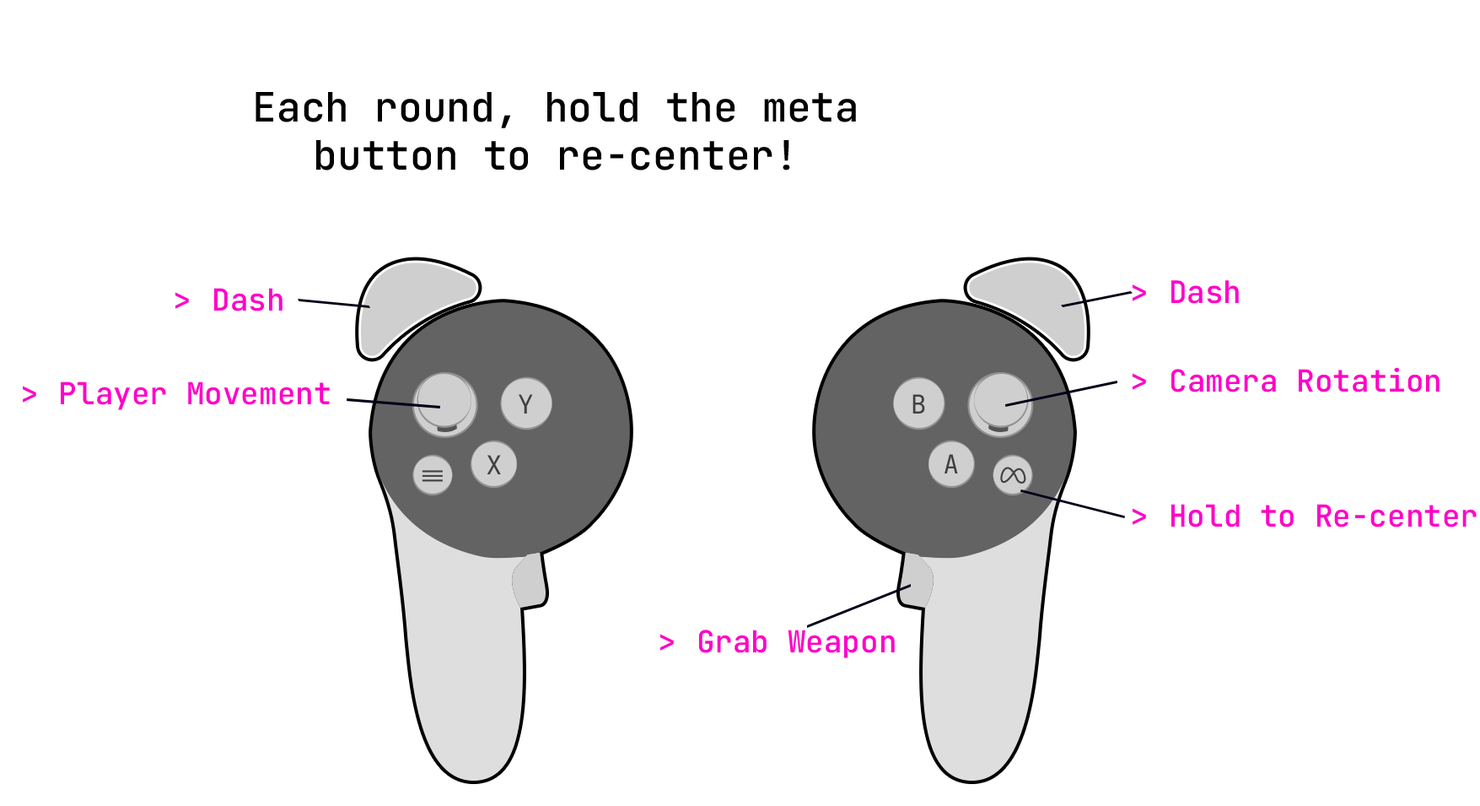
<style>
.page{position:relative;width:1480px;height:806px;background:#ffffff}
.page>*{position:absolute;margin:0}
.t1{font:40.5px "JetBrainsMonoRoman-Medium";color:#000000}
.t2{font:30.8px "JetBrainsMonoRoman-Medium";color:#ff00c8}
.t3{font:30.4px "JetBrainsMonoRoman-Medium";color:#ff00c8}
</style>
<div class="page">
<p class="t1" style="left:256px;top:92px;width:600px;height:78px;text-align:center">Each round, hold the meta button to re-center!</p>
<p class="t2" style="left:1133px;top:280px;width:106px;height:24px">Dash</p>
<p class="t3" style="left:175px;top:288px;width:108px;height:23px">Dash</p>
<p class="t3" style="left:1133px;top:367px;width:307px;height:25px">Camera Rotation</p>
<p class="t3" style="left:23px;top:381px;width:307px;height:29px">Player Movement</p>
<p class="t3" style="left:1133px;top:504px;width:344px;height:23px">Hold to Re-center</p>
<p class="t3" style="left:660px;top:629px;width:235px;height:29px">Grab Weapon</p>
</div>
